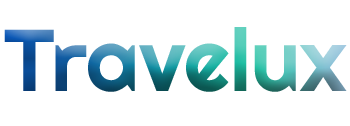
<style>
.page{position:relative;width:350px;height:126px;background:#ffffff}
.page>*{position:absolute;margin:0}
.t1{font:87.5px "Righteous-Regular"}
</style>
<div class="page">
<p class="t1" style="left:4px;top:27px;width:343px;height:65px">Travelux</p>
</div>
